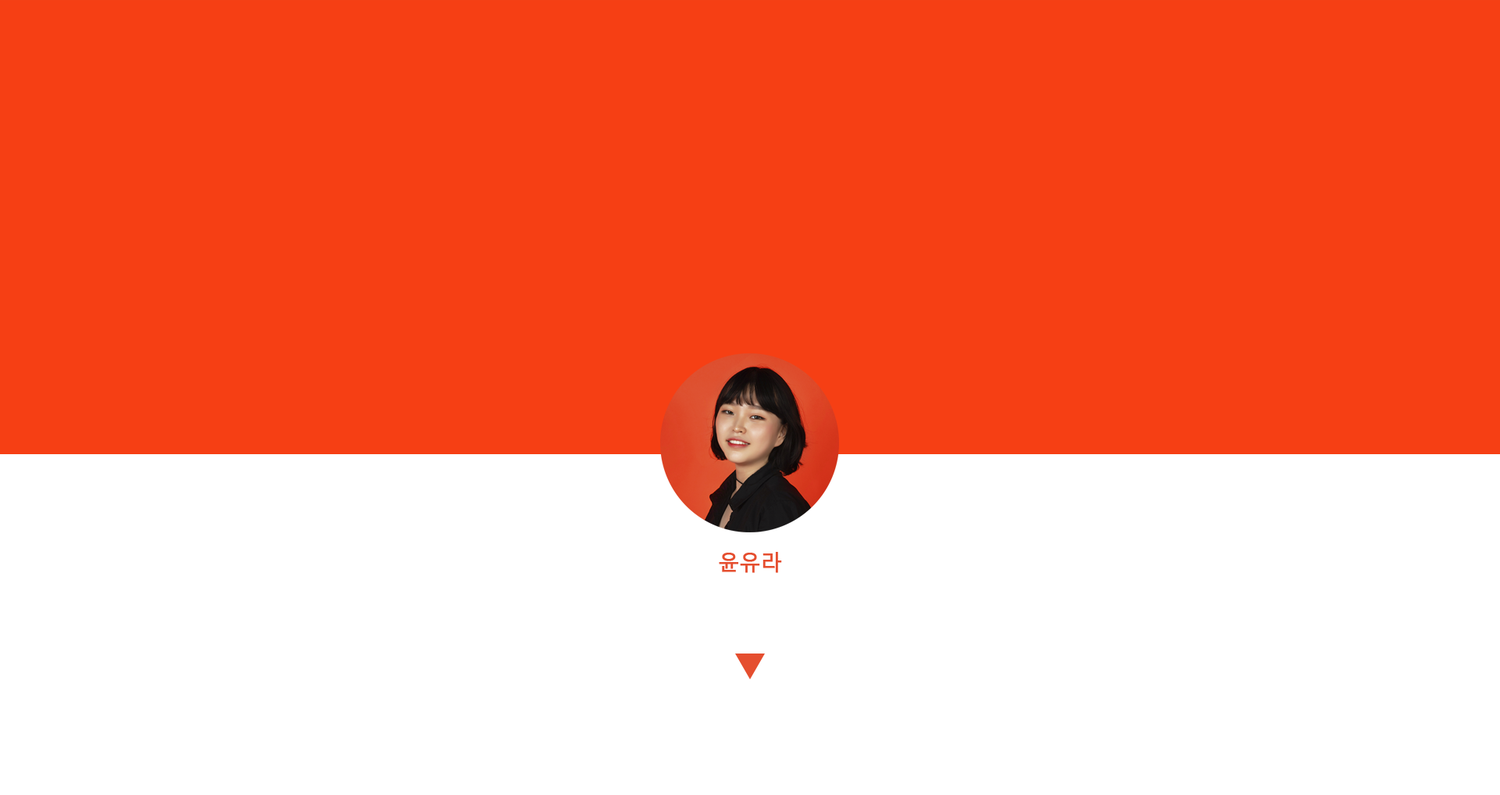
<style>
.page{position:relative;width:1500px;height:795px;background:#f63f14}
.page>*{position:absolute;margin:0}
.t1{font:20.8px "MalgunGothic";color:#e54e2f;font-weight:bold}
</style>
<div class="page">
<p class="t1" style="left:719px;top:552px;width:63px;height:21px">윤유라</p>
</div>
